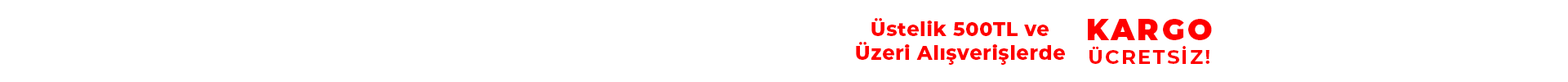
<style>
.page{position:relative;width:1568px;height:82px;background:#ffffff}
.page>*{position:absolute;margin:0}
.t1{font:19.6px "Montserrat-ExtraBold";letter-spacing:0.025em;color:#ff0000}
.t2{font:19.6px "Montserrat-Bold";letter-spacing:0.1em;color:#ff0000}
.t3{font:29.4px "Montserrat-Black";letter-spacing:0.1em;color:#ff0000}
</style>
<div class="page">
<p class="t1" style="left:856px;top:18px;width:209px;height:47px;text-align:center">Üstelik 500TL ve<br>Üzeri Alışverişlerde</p>
<p class="t2" style="left:1088px;top:19px;width:124px;height:45px;text-align:center"><span class="t3">KARGO<br></span>ÜCRETSİZ!</p>
</div>
